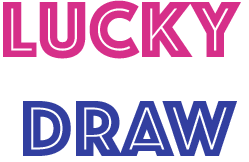
<style>
.page{position:relative;width:249px;height:162px;background:#ffffff}
.page>*{position:absolute;margin:0}
.t1{font:82.6px "Phosphate-Inline";color:#d62f89}
.t2{font:82.6px "Phosphate-Inline";color:#2428a9}
.t3{font:82.6px "Phosphate-Inline";color:#323fa0}
</style>
<div class="page">
<p class="t1" style="left:3px;top:0px;width:238px;height:156px;text-align:center">Lucky<span class="t2"> <br></span><span class="t3">draw</span></p>
</div>
